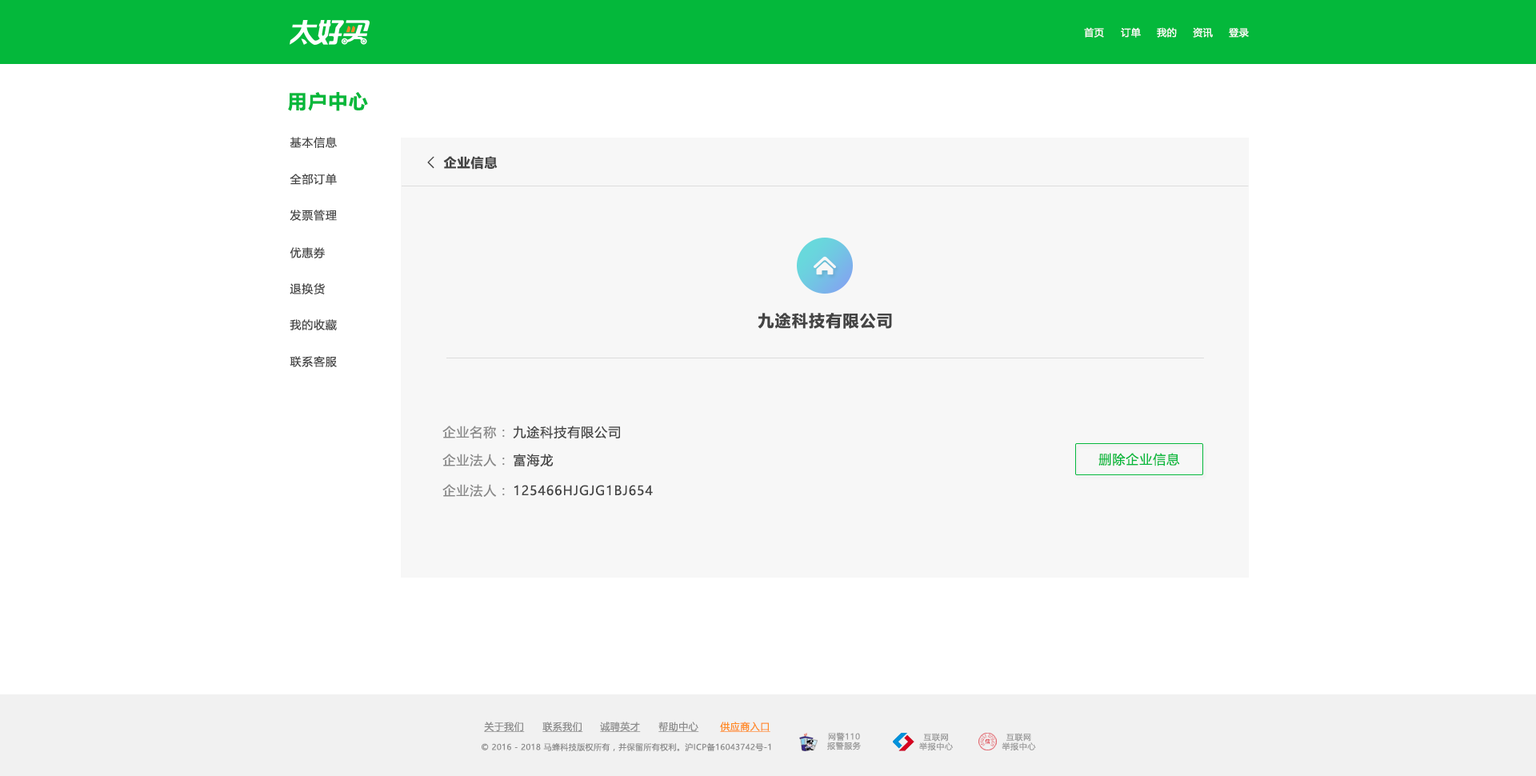
<style>
.page{position:relative;width:1536px;height:776px;background:#ffffff}
.page>*{position:absolute;margin:0}
.t1{font:9.6px "MicrosoftYaHeiUI";letter-spacing:0.04em;color:#ffffff}
.t2{font:19.2px "MicrosoftYaHeiUI-Bold";letter-spacing:0.06em;color:#04b83b}
.t3{font:11.2px "MicrosoftYaHeiUI";letter-spacing:0.06em;color:#444444}
.t4{font:16px "FangSong";color:#444444;font-weight:bold}
.t5{font:12.8px "MicrosoftYaHeiUI-Bold";letter-spacing:0.06em;color:#444444}
.t6{font:16px "MicrosoftYaHeiUI-Bold";letter-spacing:0.06em;color:#444444}
.t7{font:12.8px "MicrosoftYaHeiUI";letter-spacing:0.06em;color:#888888}
.t8{font:12.8px "MicrosoftYaHeiUI";letter-spacing:0.06em;color:#444444}
.t9{font:12.8px "MicrosoftYaHeiUI";letter-spacing:0.06em;color:#04b83b}
.t10{font:9.6px "MicrosoftYaHeiUI";letter-spacing:0.04em;color:#8c8c8c;text-decoration:underline}
.t11{font:9.6px "MicrosoftYaHeiUI";letter-spacing:0.04em;color:#ff8b25;text-decoration:underline}
.t12{font:8px/9.3px "MicrosoftYaHei";letter-spacing:0.06em;color:#999999}
.t13{font:8px "MicrosoftYaHeiUI";letter-spacing:0.04em;color:#8c8c8c}
</style>
<div class="page">
<p class="t1" style="left:1084px;top:27px;width:20px;height:11px">首页</p>
<p class="t1" style="left:1121px;top:27px;width:20px;height:11px">订单</p>
<p class="t1" style="left:1157px;top:27px;width:20px;height:11px">我的</p>
<p class="t1" style="left:1193px;top:27px;width:20px;height:11px">资讯</p>
<p class="t1" style="left:1229px;top:28px;width:20px;height:10px">登录</p>
<p class="t2" style="left:288px;top:92px;width:80px;height:19px">用户中心</p>
<p class="t3" style="left:290px;top:137px;width:47px;height:11px">基本信息</p>
<p class="t4" style="left:427px;top:156px;width:7px;height:13px">&lt;</p>
<p class="t5" style="left:443px;top:156px;width:55px;height:14px">企业信息</p>
<p class="t3" style="left:290px;top:174px;width:47px;height:11px">全部订单</p>
<p class="t3" style="left:290px;top:210px;width:47px;height:11px">发票管理</p>
<p class="t3" style="left:290px;top:247px;width:35px;height:11px">优惠券</p>
<p class="t3" style="left:290px;top:283px;width:35px;height:11px">退换货</p>
<p class="t6" style="left:758px;top:313px;width:134px;height:16px">九途科技有限公司</p>
<p class="t3" style="left:290px;top:319px;width:47px;height:11px">我的收藏</p>
<p class="t3" style="left:290px;top:356px;width:47px;height:11px">联系客服</p>
<p class="t7" style="left:442px;top:426px;width:63px;height:13px">企业名称：</p>
<p class="t8" style="left:513px;top:426px;width:107px;height:13px">九途科技有限公司</p>
<p class="t7" style="left:442px;top:454px;width:63px;height:12px">企业法人：</p>
<p class="t8" style="left:514px;top:454px;width:40px;height:13px">富海龙</p>
<p class="t9" style="left:1099px;top:453px;width:81px;height:13px">删除企业信息</p>
<p class="t7" style="left:442px;top:484px;width:63px;height:13px">企业法人：</p>
<p class="t8" style="left:515px;top:485px;width:138px;height:11px">125466HJGJG1BJ654</p>
<p class="t10" style="left:484px;top:722px;width:41px;height:10px">关于我们</p>
<p class="t10" style="left:543px;top:722px;width:40px;height:10px">联系我们</p>
<p class="t10" style="left:600px;top:722px;width:41px;height:10px">诚聘英才</p>
<p class="t10" style="left:659px;top:722px;width:40px;height:10px">帮助中心</p>
<p class="t11" style="left:720px;top:722px;width:51px;height:10px">供应商入口</p>
<p class="t12" style="left:827px;top:732px;width:34px;height:19px;text-align:center">网警110<br>报警服务</p>
<p class="t12" style="left:919px;top:733px;width:34px;height:18px;text-align:center">互联网<br>举报中心</p>
<p class="t12" style="left:1002px;top:733px;width:34px;height:18px;text-align:center">互联网<br>举报中心</p>
<p class="t13" style="left:482px;top:743px;width:289px;height:8px">© 2016 - 2018 马蜂科技版权所有，并保留所有权利。沪ICP备16043742号-1</p>
</div>
